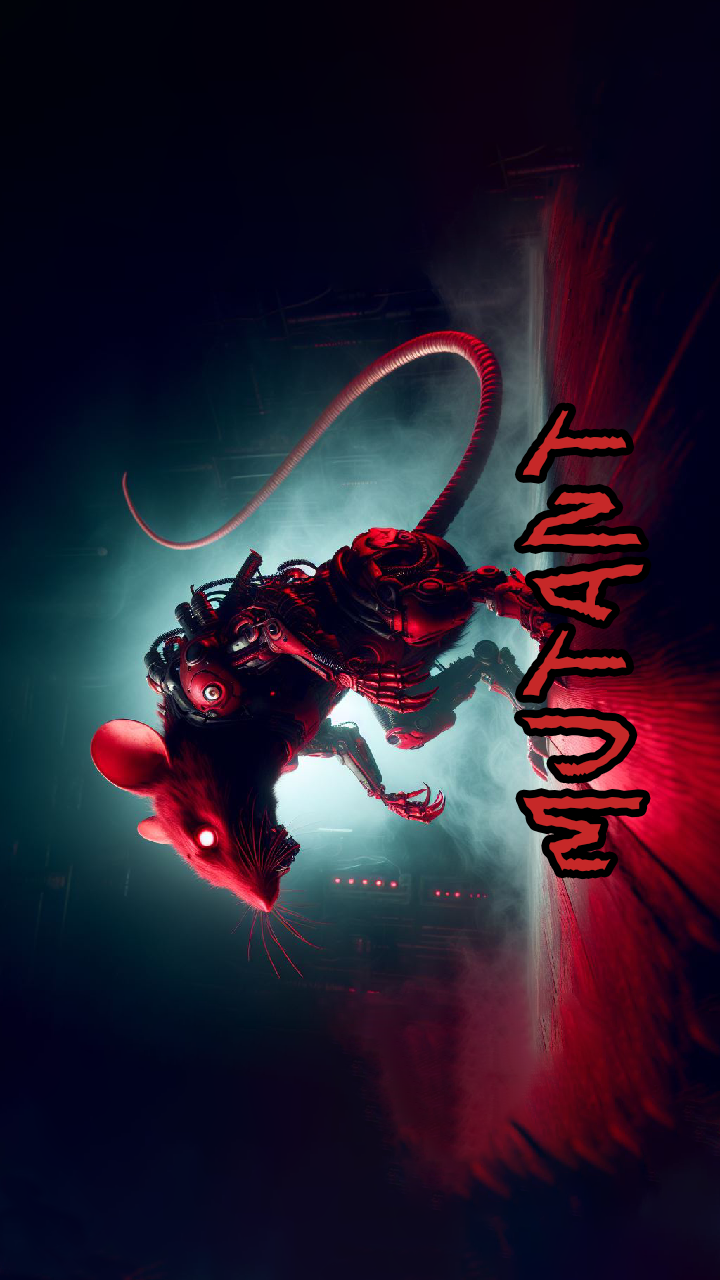
<style>
.page{position:relative;width:720px;height:1280px}
.page>*{position:absolute;margin:0}
.t1{font:133.3px "PinkyScreamRegular";letter-spacing:0.1em;color:#c62828}
</style>
<div class="page">
<p class="t1" style="left:521px;top:410px;width:123px;height:462px;rotate:-90deg">Mutant</p>
</div>
